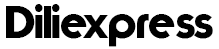
<style>
.page{position:relative;width:219px;height:49px;background:#ffffff}
.page>*{position:absolute;margin:0}
.t1{font:45.6px "TypoGraphica";color:#000000}
</style>
<div class="page">
<p class="t1" style="left:6px;top:4px;width:207px;height:43px">Diliexpress</p>
</div>
